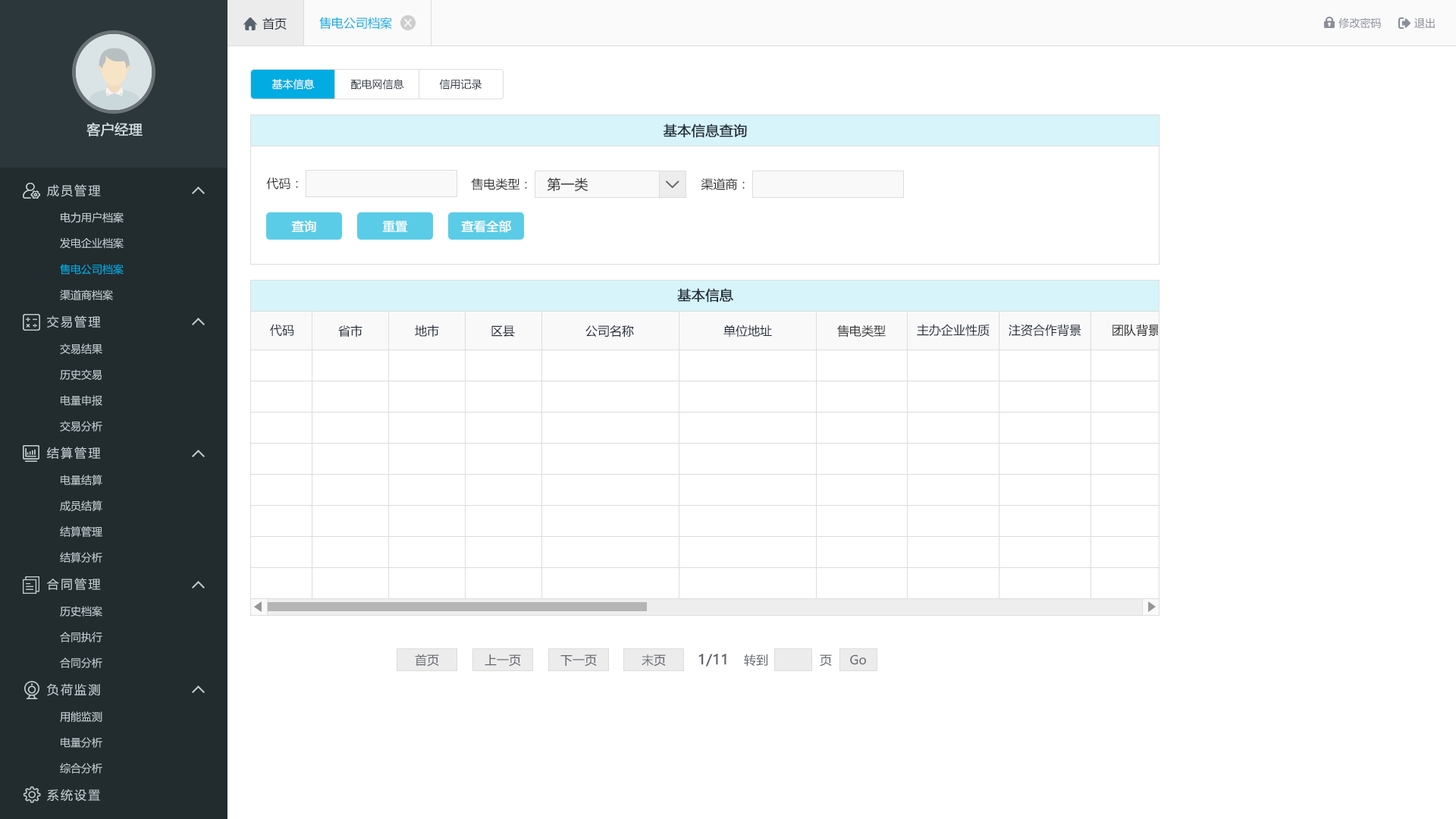
<style>
.page{position:relative;width:1456px;height:819px;background:#ffffff}
.page>*{position:absolute;margin:0}
.t1{font:12.1px "MicrosoftYaHei";color:#242e3b}
.t2{font:12.1px "MicrosoftYaHei";color:#00ace2}
.t3{font:10.6px "MicrosoftYaHei";color:#8a8f99}
.t4{font:10.6px "MicrosoftYaHei";color:#ffffff}
.t5{font:10.6px "MicrosoftYaHei";color:#242e3b}
.t6{font:13.6px "MicrosoftYaHei";color:#d1dce2;font-weight:bold}
.t7{font:13.6px "MicrosoftYaHei";color:#242e3b;font-weight:bold}
.t8{font:12.1px "MicrosoftYaHei";letter-spacing:0.14em;color:#c2cdd2}
.t9{font:12.1px "MicrosoftYaHei";color:#333333}
.t10{font:13.6px "MicrosoftYaHei";color:#333333}
.t11{font:10.6px "MicrosoftYaHei";color:#c2cdd2}
.t12{font:12.1px "MicrosoftYaHei";color:#ffffff;font-weight:bold}
.t13{font:10.6px "MicrosoftYaHei";color:#00ace2}
.t14{font:12.1px "MicrosoftYaHei";color:#61656b}
.t15{font:13.6px "MicrosoftYaHei";color:#61656b;font-weight:bold}
</style>
<div class="page">
<p class="t1" style="left:262px;top:17px;width:25px;height:13px">首页</p>
<p class="t2" style="left:319px;top:17px;width:73px;height:13px">售电公司档案</p>
<p class="t3" style="left:1338px;top:17px;width:43px;height:12px">修改密码</p>
<p class="t3" style="left:1414px;top:17px;width:21px;height:11px">退出</p>
<p class="t4" style="left:271px;top:79px;width:44px;height:10px">基本信息</p>
<p class="t5" style="left:350px;top:79px;width:54px;height:10px">配电网信息</p>
<p class="t5" style="left:439px;top:79px;width:43px;height:10px">信用记录</p>
<p class="t6" style="left:86px;top:122px;width:57px;height:14px">客户经理</p>
<p class="t7" style="left:663px;top:124px;width:84px;height:14px">基本信息查询</p>
<p class="t7" style="left:663px;top:124px;width:84px;height:14px">基本信息查询</p>
<p class="t8" style="left:47px;top:184px;width:54px;height:13px">成员管理</p>
<p class="t9" style="left:266px;top:177px;width:32px;height:13px">代码：</p>
<p class="t9" style="left:471px;top:178px;width:56px;height:12px">售电类型：</p>
<p class="t9" style="left:471px;top:178px;width:56px;height:12px">售电类型：</p>
<p class="t10" style="left:547px;top:177px;width:41px;height:14px">第一类</p>
<p class="t9" style="left:701px;top:178px;width:44px;height:12px">渠道商：</p>
<p class="t9" style="left:701px;top:178px;width:44px;height:12px">渠道商：</p>
<p class="t11" style="left:61px;top:212px;width:63px;height:11px">电力用户档案</p>
<p class="t12" style="left:291px;top:220px;width:25px;height:12px">查询</p>
<p class="t12" style="left:382px;top:221px;width:26px;height:11px">重置</p>
<p class="t12" style="left:461px;top:220px;width:50px;height:13px">查看全部</p>
<p class="t12" style="left:382px;top:222px;width:26px;height:12px">重置</p>
<p class="t11" style="left:60px;top:237px;width:64px;height:12px">发电企业档案</p>
<p class="t13" style="left:60px;top:264px;width:64px;height:11px">售电公司档案</p>
<p class="t11" style="left:60px;top:290px;width:53px;height:10px">渠道商档案</p>
<p class="t7" style="left:677px;top:288px;width:56px;height:15px">基本信息</p>
<p class="t8" style="left:47px;top:315px;width:54px;height:13px">交易管理</p>
<p class="t1" style="left:270px;top:324px;width:24px;height:12px">代码</p>
<p class="t1" style="left:338px;top:325px;width:24px;height:12px">省市</p>
<p class="t1" style="left:415px;top:325px;width:24px;height:12px">地市</p>
<p class="t1" style="left:491px;top:325px;width:24px;height:12px">区县</p>
<p class="t1" style="left:585px;top:325px;width:49px;height:12px">公司名称</p>
<p class="t1" style="left:723px;top:325px;width:49px;height:12px">单位地址</p>
<p class="t9" style="left:837px;top:325px;width:49px;height:12px">售电类型</p>
<p class="t1" style="left:917px;top:324px;width:73px;height:13px">主办企业性质</p>
<p class="t1" style="left:1009px;top:324px;width:72px;height:13px">注资合作背景</p>
<p class="t11" style="left:60px;top:344px;width:42px;height:10px">交易结果</p>
<p class="t11" style="left:60px;top:369px;width:42px;height:11px">历史交易</p>
<p class="t11" style="left:61px;top:395px;width:41px;height:11px">电量申报</p>
<p class="t11" style="left:60px;top:421px;width:42px;height:10px">交易分析</p>
<p class="t8" style="left:47px;top:447px;width:54px;height:13px">结算管理</p>
<p class="t11" style="left:61px;top:475px;width:41px;height:10px">电量结算</p>
<p class="t11" style="left:60px;top:500px;width:42px;height:11px">成员结算</p>
<p class="t11" style="left:60px;top:526px;width:42px;height:11px">结算管理</p>
<p class="t11" style="left:60px;top:552px;width:42px;height:11px">结算分析</p>
<p class="t8" style="left:47px;top:578px;width:54px;height:12px">合同管理</p>
<p class="t11" style="left:60px;top:606px;width:42px;height:11px">历史档案</p>
<p class="t11" style="left:60px;top:632px;width:42px;height:10px">合同执行</p>
<p class="t14" style="left:415px;top:654px;width:24px;height:13px">首页</p>
<p class="t14" style="left:642px;top:654px;width:24px;height:13px">末页</p>
<p class="t15" style="left:698px;top:654px;width:28px;height:13px">1/11</p>
<p class="t14" style="left:744px;top:654px;width:23px;height:12px">转到</p>
<p class="t11" style="left:60px;top:657px;width:42px;height:11px">合同分析</p>
<p class="t14" style="left:485px;top:654px;width:36px;height:13px">上一页</p>
<p class="t14" style="left:560px;top:654px;width:37px;height:13px">下一页</p>
<p class="t14" style="left:820px;top:654px;width:12px;height:13px">页</p>
<p class="t14" style="left:850px;top:654px;width:16px;height:11px">Go</p>
<p class="t8" style="left:47px;top:683px;width:53px;height:13px">负荷监测</p>
<p class="t11" style="left:60px;top:711px;width:42px;height:11px">用能监测</p>
<p class="t11" style="left:61px;top:737px;width:41px;height:11px">电量分析</p>
<p class="t11" style="left:60px;top:763px;width:42px;height:10px">综合分析</p>
<p class="t8" style="left:47px;top:789px;width:53px;height:13px">系统设置</p>
</div>
